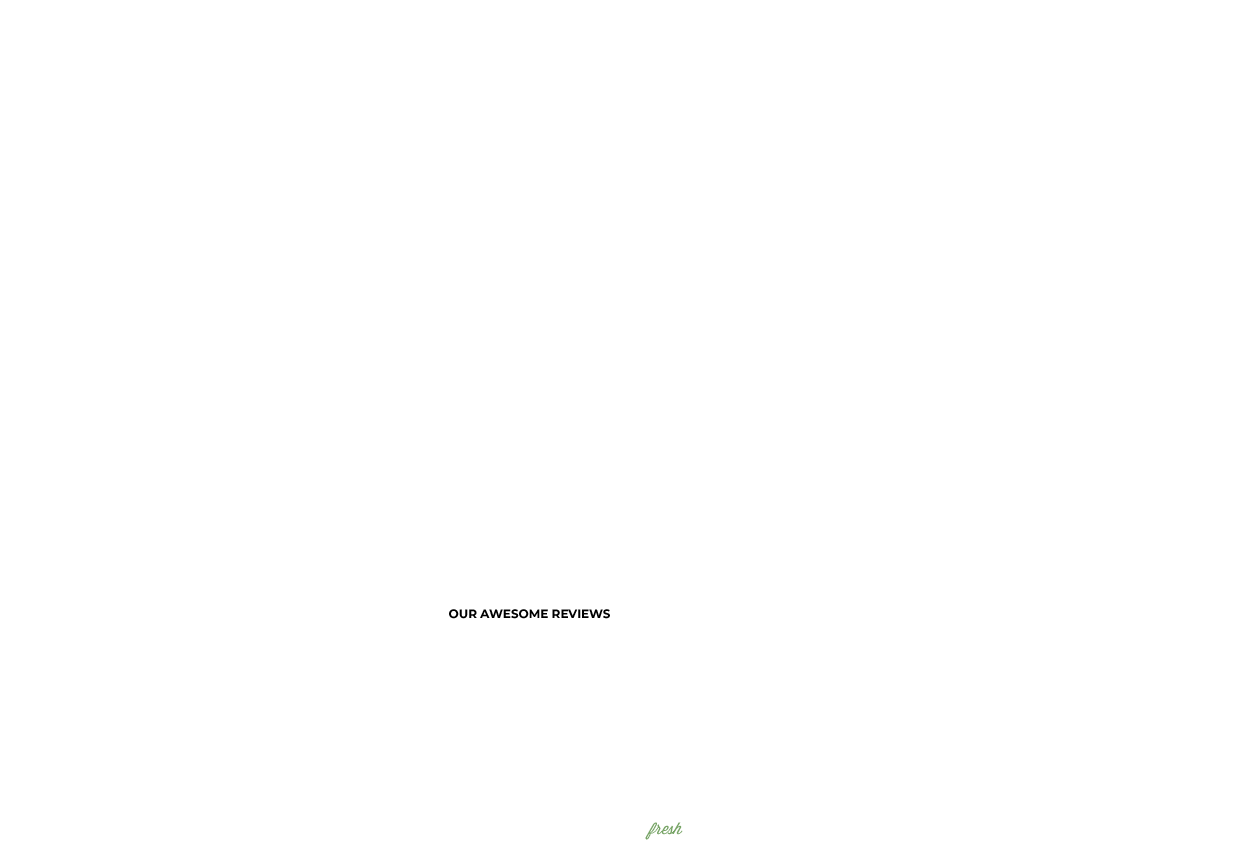
<style>
.page{position:relative;width:1240px;height:868px;background:#ffffff}
.page>*{position:absolute;margin:0}
.t1{font:12px "Montserrat-Bold";color:#000000;text-transform:uppercase}
.t2{font:16px "Wisdom-Script";color:#77a466}
</style>
<div class="page">
<p class="t1" style="left:449px;top:609px;width:161px;height:10px">OUR AWESOME REVIEWS</p>
<p class="t2" style="left:645px;top:822px;width:38px;height:18px">fresh</p>
</div>
